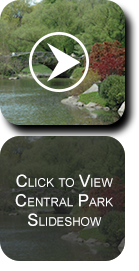
<style>
.page{position:relative;width:139px;height:271px}
.page>*{position:absolute;margin:0}
.t1{font:16.7px/19.4px "ArialMT";color:#ffffff;font-variant:small-caps}
</style>
<div class="page">
<p class="t1" style="left:15px;top:174px;width:98px;height:52px;text-align:center">Click to View Central Park Slideshow</p>
</div>
